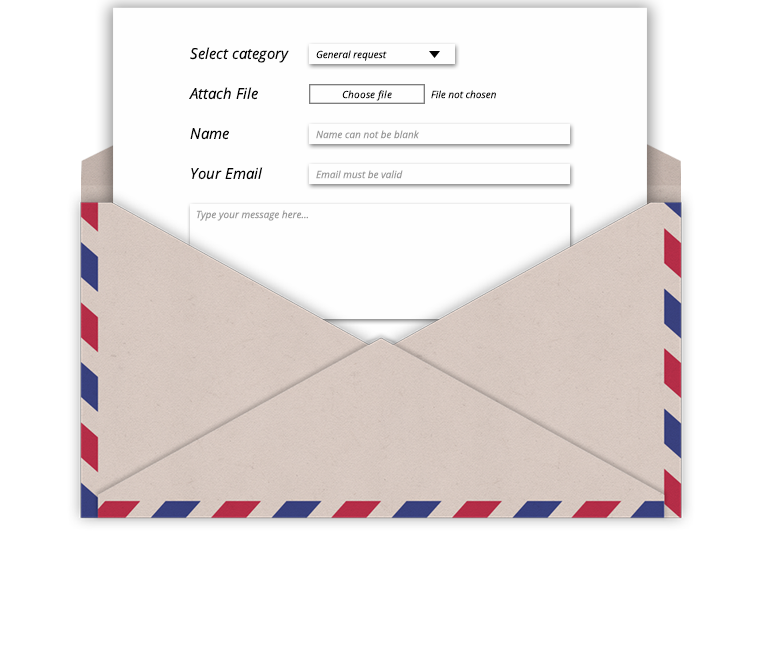
<style>
.page{position:relative;width:760px;height:650px;background:#ffffff}
.page>*{position:absolute;margin:0}
.t1{font:15px "OpenSans-Italic";color:#030303}
.t2{font:10px "OpenSans-Italic";color:#000000}
.t3{font:10px "OpenSans-Italic";color:#030303}
.t4{font:10px "OpenSans-Italic";color:#999999}
</style>
<div class="page">
<p class="t1" style="left:190px;top:47px;width:99px;height:16px">Select category</p>
<p class="t2" style="left:316px;top:50px;width:71px;height:11px">General request</p>
<p class="t1" style="left:189px;top:87px;width:69px;height:13px">Attach File</p>
<p class="t2" style="left:342px;top:90px;width:50px;height:11px">Choose file</p>
<p class="t3" style="left:431px;top:90px;width:65px;height:9px">File not chosen</p>
<p class="t1" style="left:190px;top:128px;width:39px;height:12px">Name</p>
<p class="t4" style="left:316px;top:130px;width:103px;height:9px">Name can not be blank</p>
<p class="t1" style="left:191px;top:167px;width:72px;height:13px">Your Email</p>
<p class="t4" style="left:316px;top:170px;width:87px;height:9px">Email must be valid</p>
<p class="t4" style="left:196px;top:210px;width:112px;height:11px">Type your message here...</p>
</div>
